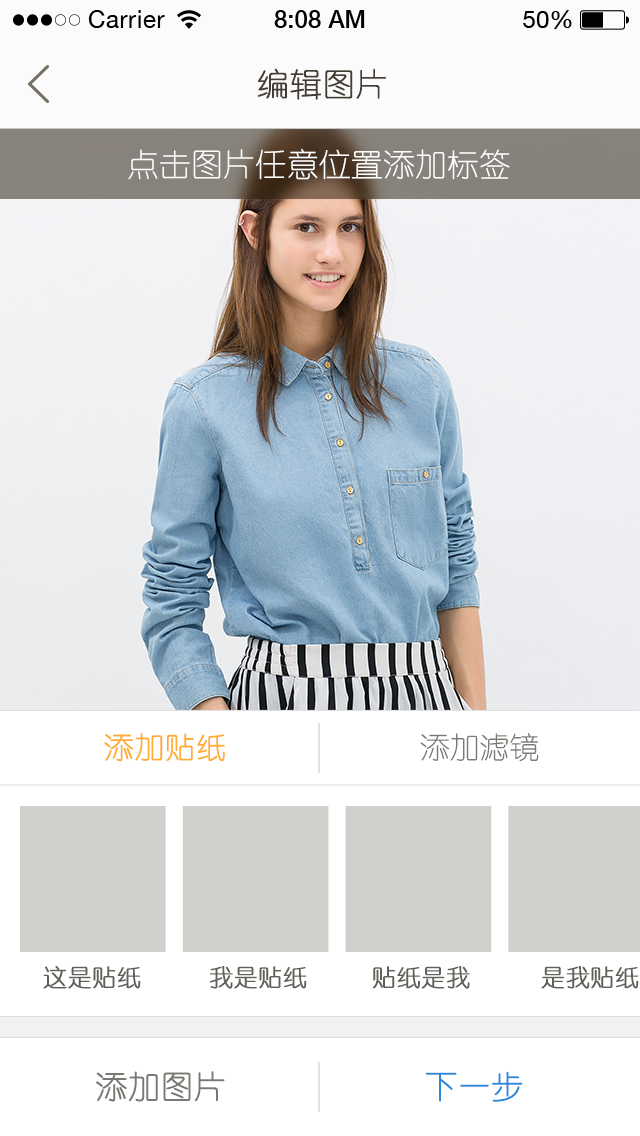
<style>
.page{position:relative;width:640px;height:1136px;background:#ffffff}
.page>*{position:absolute;margin:0}
.t1{font:32px "YouYuan";color:#433d33;text-transform:uppercase;font-weight:bold}
.t2{font:32px "YouYuan";color:#fefefe;text-transform:uppercase}
.t3{font:30px "YouYuan";color:#ffad34;text-transform:uppercase;font-weight:bold}
.t4{font:30px "YouYuan";color:#7b7973;text-transform:uppercase}
.t5{font:24px "YouYuan";color:#625e58;text-transform:uppercase;font-weight:bold}
.t6{font:32px "YouYuan";color:#7b7873;text-transform:uppercase;font-weight:bold}
.t7{font:32px "YouYuan";color:#2f88da;text-transform:uppercase;font-weight:bold}
</style>
<div class="page">
<p class="t1" style="left:257px;top:68px;width:129px;height:32px">编辑图片</p>
<p class="t2" style="left:128px;top:148px;width:382px;height:32px">点击图片任意位置添加标签</p>
<p class="t3" style="left:104px;top:732px;width:121px;height:30px">添加贴纸</p>
<p class="t4" style="left:420px;top:733px;width:119px;height:29px">添加滤镜</p>
<p class="t5" style="left:43px;top:966px;width:98px;height:23px">这是贴纸</p>
<p class="t5" style="left:210px;top:966px;width:97px;height:23px">我是贴纸</p>
<p class="t5" style="left:373px;top:966px;width:97px;height:23px">贴纸是我</p>
<p class="t5" style="left:541px;top:966px;width:98px;height:23px">是我贴纸</p>
<p class="t6" style="left:96px;top:1071px;width:129px;height:31px">添加图片</p>
<p class="t7" style="left:425px;top:1071px;width:98px;height:31px">下一步</p>
</div>
